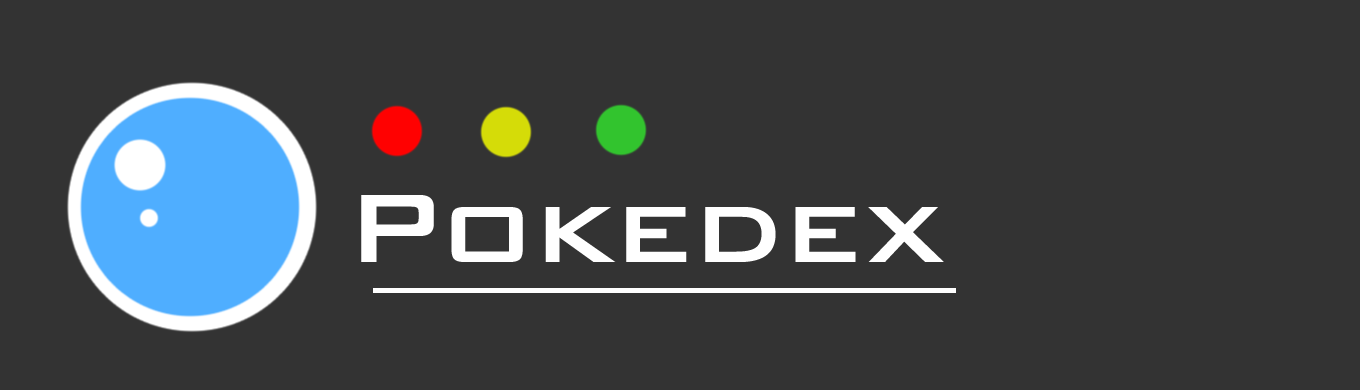
<style>
.page{position:relative;width:1360px;height:390px;background:#333333}
.page>*{position:absolute;margin:0}
.t1{font:130px "BankGothicBT-Medium";color:#ffffff}
</style>
<div class="page">
<p class="t1" style="left:361px;top:195px;width:583px;height:67px">Pokedex</p>
</div>
